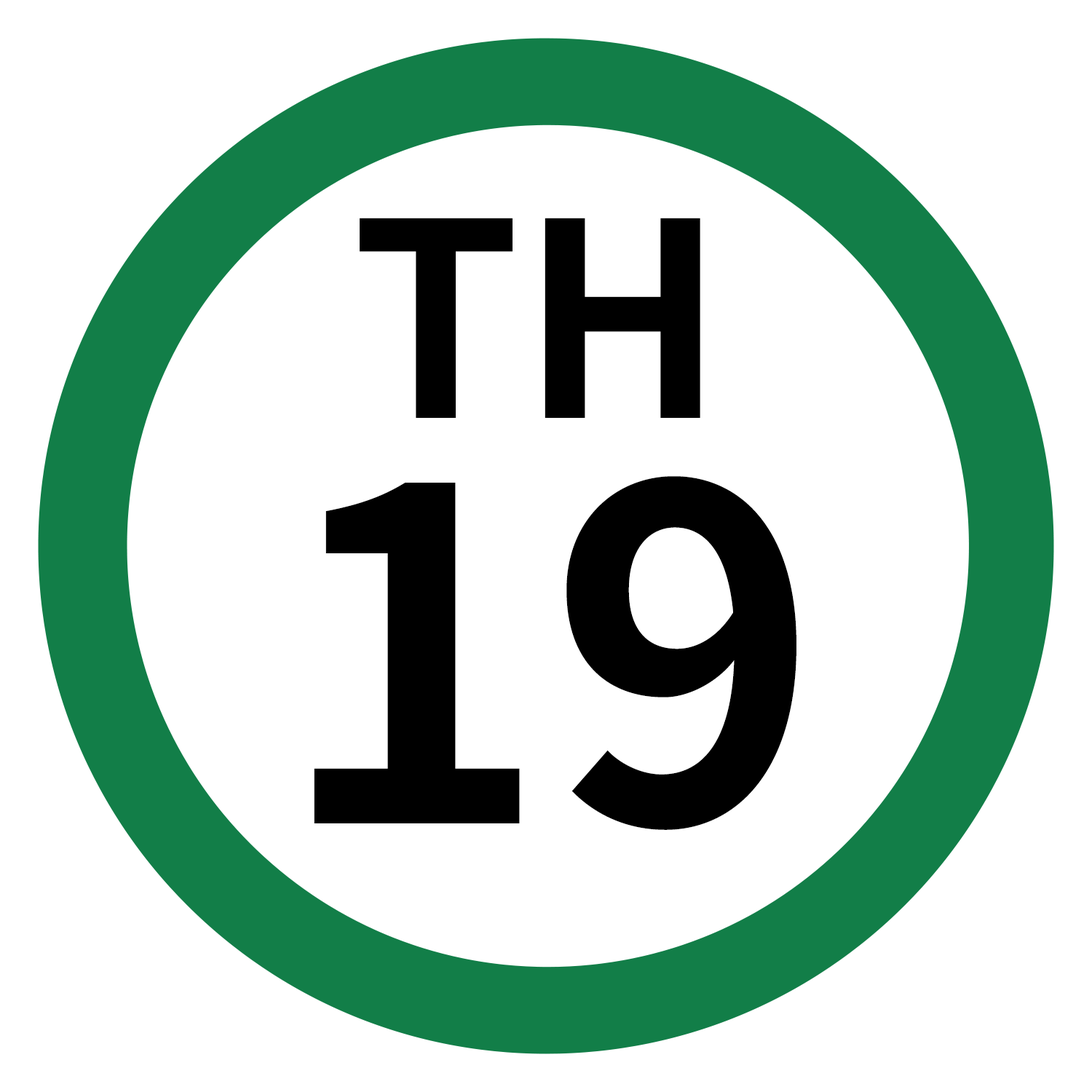
<style>
.page{position:relative;width:1092px;height:1092px;background:#ffffff}
.page>*{position:absolute;margin:0}
.t1{font:269.8px "NotoSansJP-Bold";color:#000000}
.t2{font:460.5px "NotoSansJP-Bold";color:#000000}
</style>
<div class="page">
<p class="t1" style="left:360px;top:218px;width:340px;height:200px">TH</p>
<p class="t2" style="left:314px;top:476px;width:482px;height:354px">19</p>
</div>
